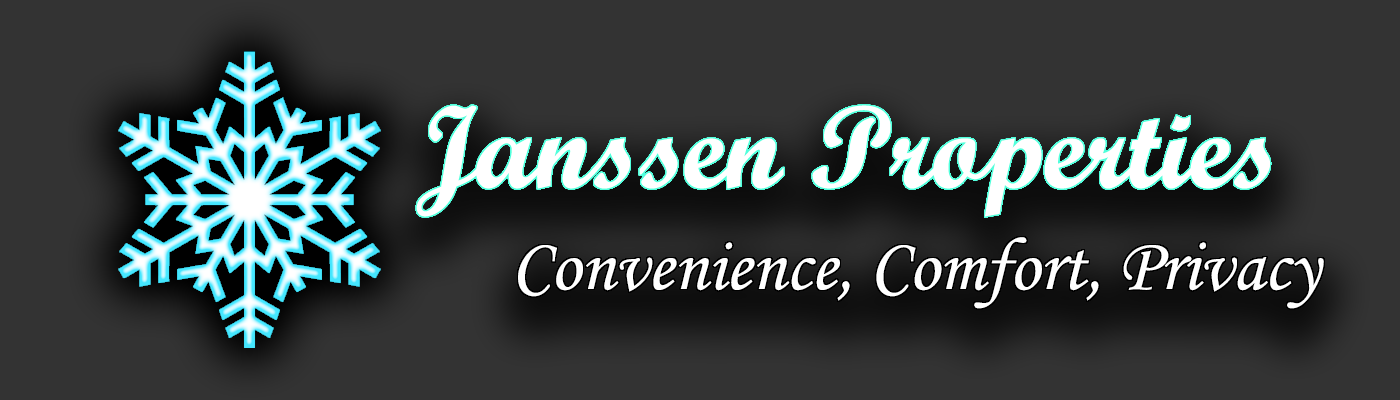
<style>
.page{position:relative;width:1400px;height:400px;background:#333333}
.page>*{position:absolute;margin:0}
.t1{font:116.7px "ScriptMTBold";color:#ffffff}
.t2{font:75px "MonotypeCorsiva";color:#ffffff}
</style>
<div class="page">
<p class="t1" style="left:416px;top:105px;width:855px;height:112px">Janssen Properties</p>
<p class="t2" style="left:518px;top:237px;width:806px;height:72px">Convenience, Comfort, Privacy</p>
</div>
